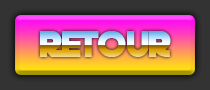
<style>
.page{position:relative;width:210px;height:90px;background:#333333}
.page>*{position:absolute;margin:0}
.t1{font:36px "DeathStar"}
</style>
<div class="page">
<p class="t1" style="left:40px;top:31px;width:131px;height:26px">Retour</p>
</div>
